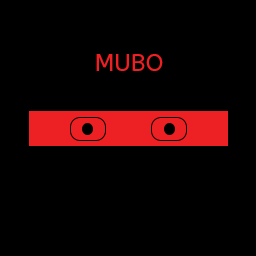
<style>
.page{position:relative;width:256px;height:256px;background:#000000}
.page>*{position:absolute;margin:0}
.t1{font:24px "ABeeZee-Regular";color:#ed2024}
</style>
<div class="page">
<p class="t1" style="left:96px;top:54px;width:67px;height:17px">MUBO</p>
</div>
